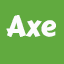
<style>
.page{position:relative;width:64px;height:64px;background:#61aa3f}
.page>*{position:absolute;margin:0}
.t1{font:29px "CarterOne";color:#fcfcfc}
</style>
<div class="page">
<p class="t1" style="left:6px;top:15px;width:50px;height:22px">Axe</p>
</div>
